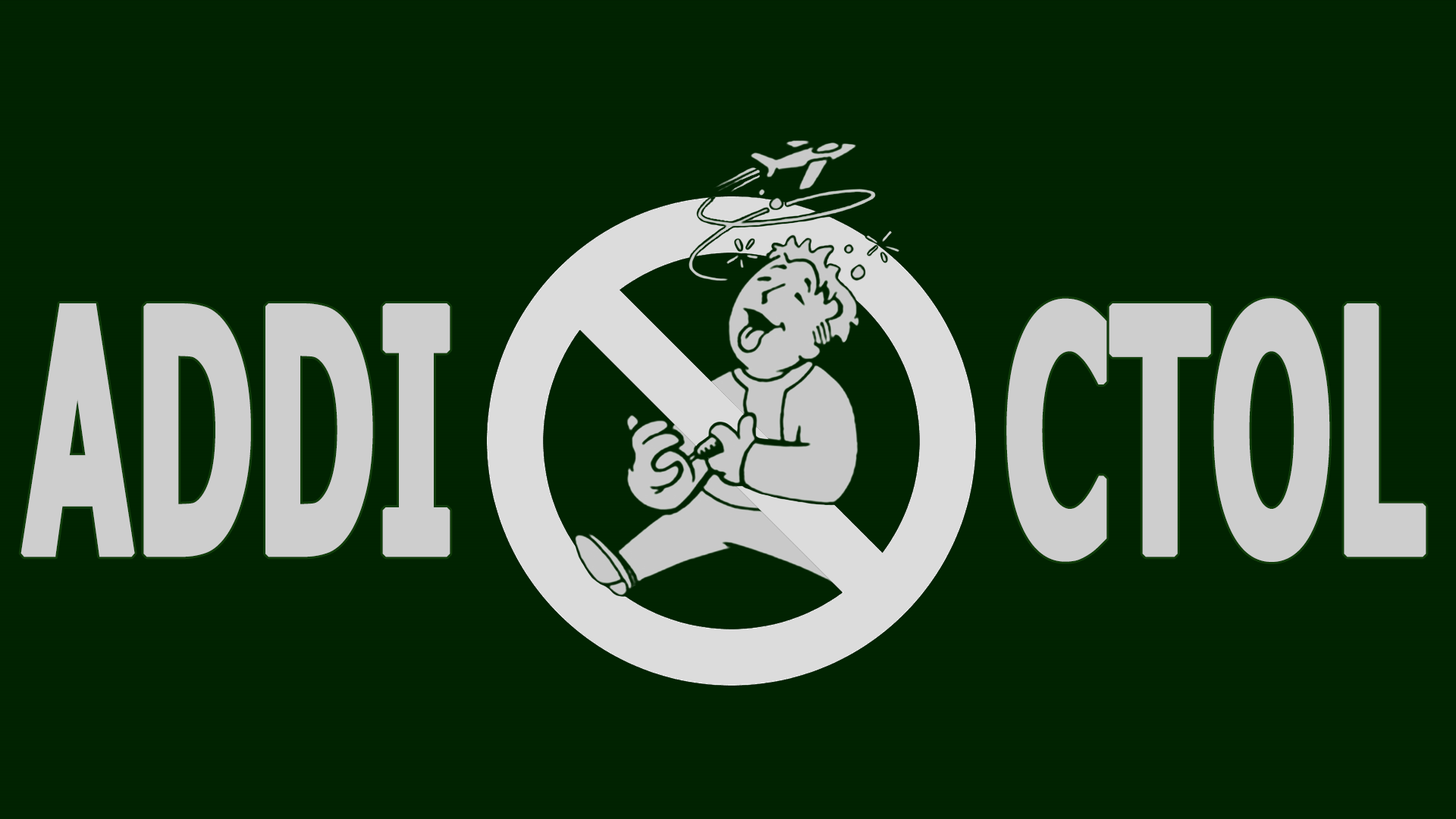
<style>
.page{position:relative;width:1456px;height:819px;background:#012301}
.page>*{position:absolute;margin:0}
.t1{font:339.7px "Tahoma-Bold";color:#cecece;font-weight:bold;scale:0.46 1}
</style>
<div class="page">
<p class="t1" style="left:20px;top:298px;width:1406px;height:264px">ADDI           CTOL</p>
</div>
